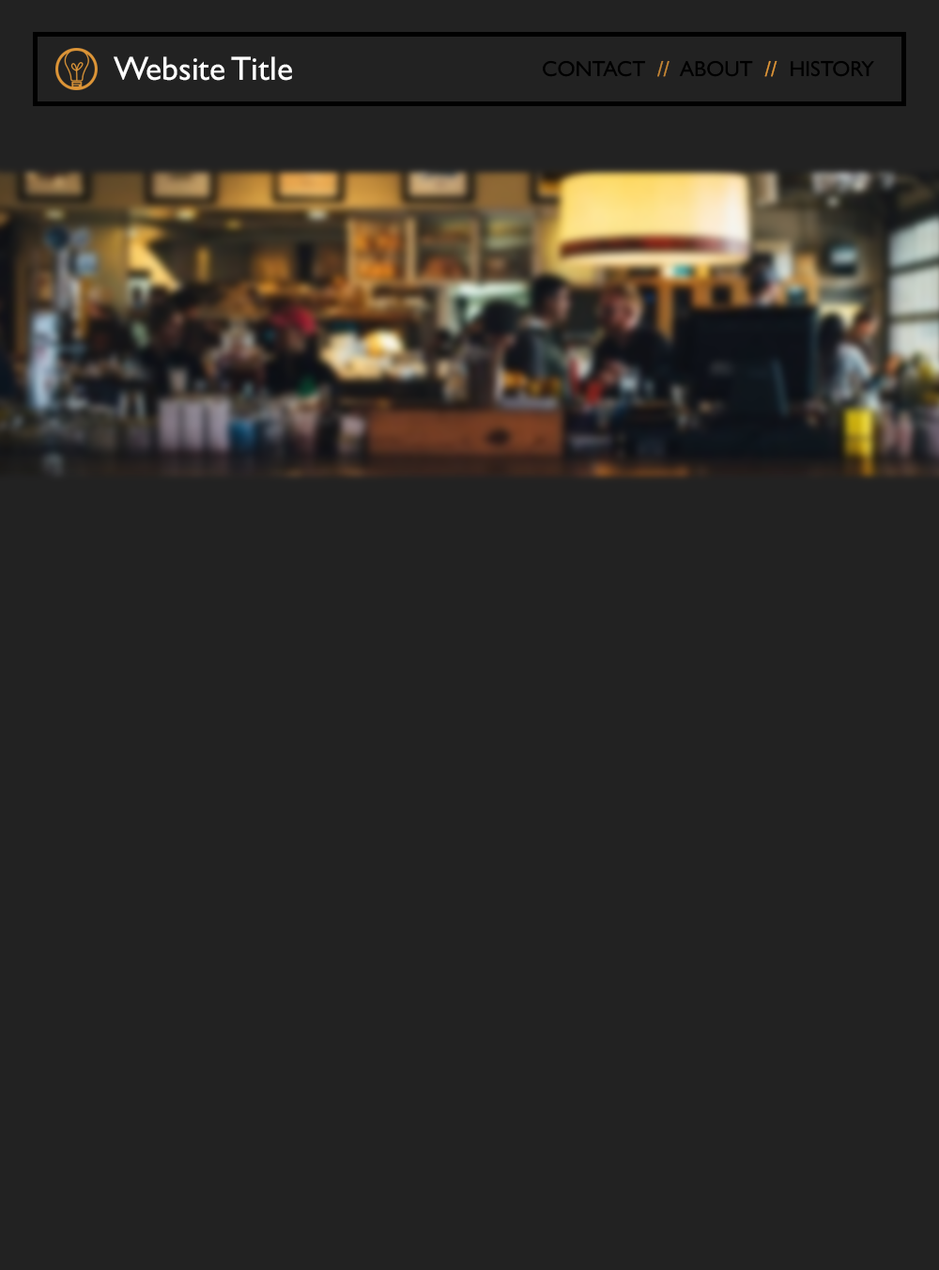
<style>
.page{position:relative;width:939px;height:1270px;background:#222222}
.page>*{position:absolute;margin:0}
.t1{font:33.6px "GillSansMT";color:#ffffff}
.t2{font:21.7px "GillSansMT";color:#000000}
.t3{font:21.7px "GillSansMT";color:#c68734}
.t4{font:21.7px "GillSansMT";color:#dd9537}
</style>
<div class="page">
<p class="t1" style="left:114px;top:56px;width:178px;height:25px">Website Title</p>
<p class="t2" style="left:543px;top:60px;width:331px;height:17px">CONTACT  <span class="t3">//</span>  ABOUT  <span class="t4">//</span>  HISTORY</p>
</div>
